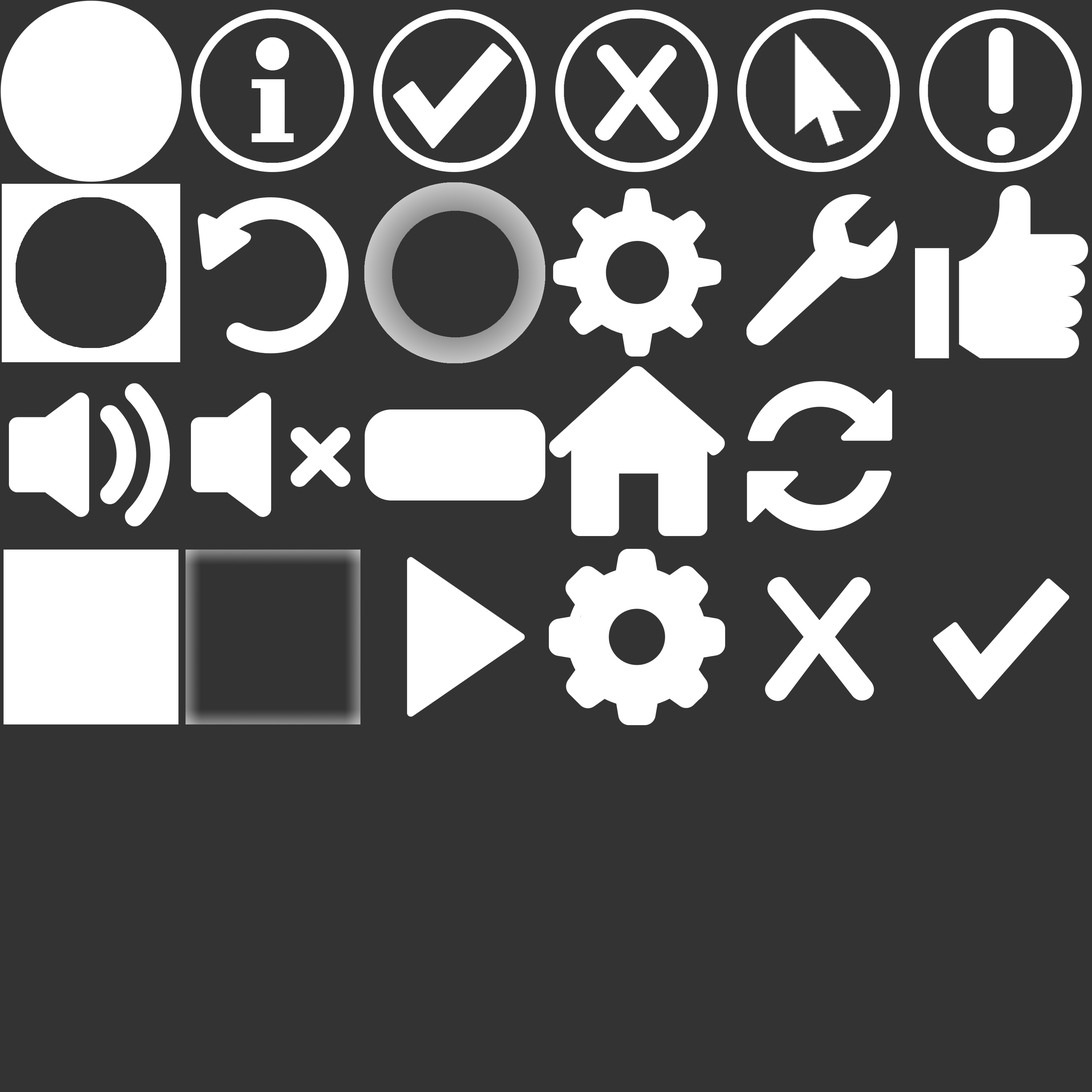
<style>
.page{position:relative;width:1092px;height:1092px;background:#333333}
.page>*{position:absolute;margin:0}
.t1{font:177.7px "Multicolore";color:#ffffff;text-transform:uppercase}
.t2{font:137.6px "Multicolore";color:#ffffff;text-transform:uppercase}
</style>
<div class="page">
<p class="t1" style="left:987px;top:27px;width:28px;height:128px">!</p>
<p class="t2" style="left:595px;top:44px;width:84px;height:97px">x</p>
<p class="t1" style="left:765px;top:577px;width:109px;height:124px">x</p>
</div>
